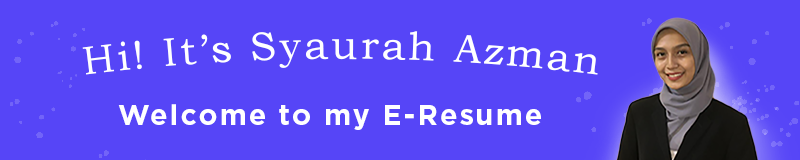
<style>
.page{position:relative;width:800px;height:160px;background:#5645f7}
.page>*{position:absolute;margin:0}
.t1{font:39.7px "BookmanOldStyle";letter-spacing:0.075em;color:#ffffff}
.t2{font:28.4px "Gotham-Bold";letter-spacing:0.075em;color:#ffffff}
</style>
<div class="page">
<p class="t1" style="left:82px;top:31px;width:516px;height:44px">Hi! It’s Syaurah Azman</p>
<p class="t2" style="left:118px;top:104px;width:423px;height:26px">Welcome to my E-Resume</p>
</div>
